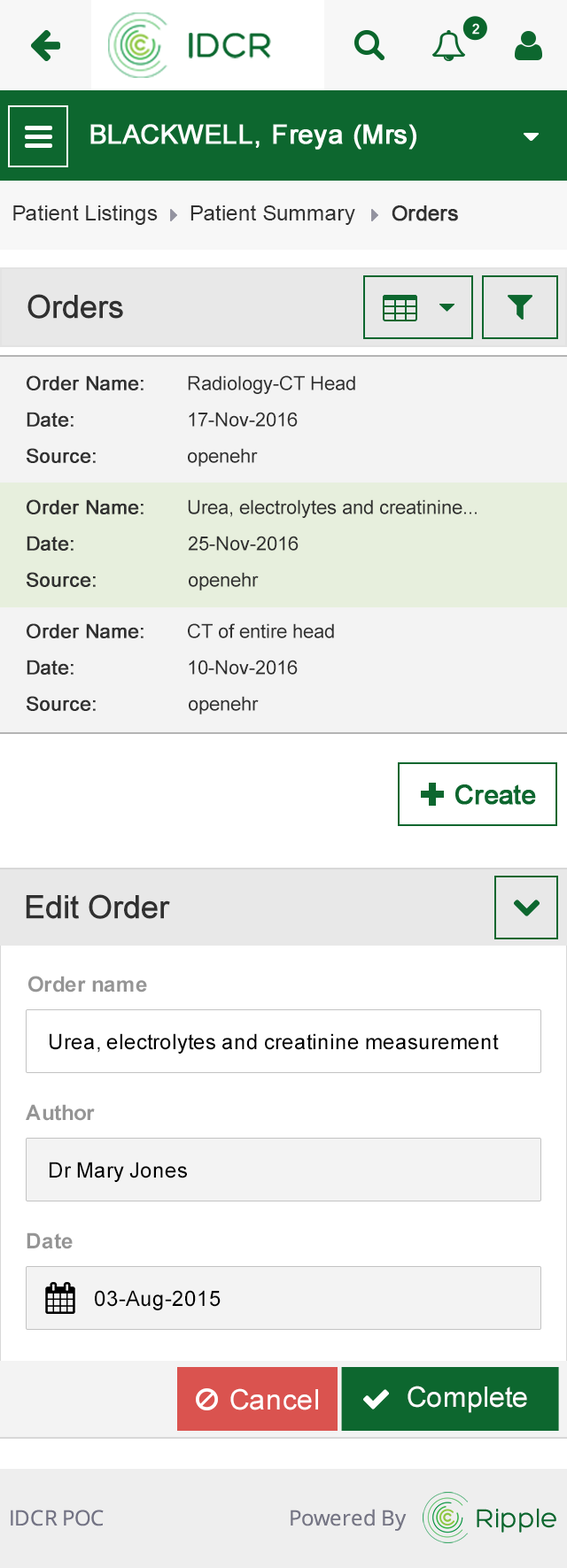
<style>
.page{position:relative;width:567px;height:1568px;background:#ffffff}
.page>*{position:absolute;margin:0}
.t1{font:21.2px "ArialMT";color:#313131}
.t2{font:21.2px "ArialMT";color:#313131;font-weight:bold}
.t3{font:31.9px "ArialMT";color:#303030;font-weight:bold}
.t4{font:19.5px "ArialMT";color:#303030;font-weight:bold}
.t5{font:19.5px "ArialMT";color:#303030}
.t6{font:21.2px "Arial-BoldMT";color:#959595}
.t7{font:21.2px "ArialMT";color:#000000}
.t8{font:28.3px "ArialMT";color:#ffffff}
</style>
<div class="page">
<p class="t1" style="left:13px;top:205px;width:145px;height:20px">Patient Listings</p>
<p class="t1" style="left:190px;top:205px;width:165px;height:20px">Patient Summary</p>
<p class="t2" style="left:391px;top:205px;width:67px;height:16px">Orders</p>
<p class="t3" style="left:27px;top:294px;width:96px;height:25px">Orders</p>
<p class="t4" style="left:27px;top:375px;width:116px;height:15px">Order Name:</p>
<p class="t5" style="left:188px;top:375px;width:167px;height:19px">Radiology-CT Head</p>
<p class="t4" style="left:27px;top:412px;width:46px;height:15px">Date:</p>
<p class="t5" style="left:189px;top:412px;width:108px;height:15px">17-Nov-2016</p>
<p class="t4" style="left:27px;top:448px;width:69px;height:15px">Source:</p>
<p class="t5" style="left:188px;top:448px;width:70px;height:19px">openehr</p>
<p class="t4" style="left:27px;top:499px;width:116px;height:15px">Order Name:</p>
<p class="t5" style="left:188px;top:499px;width:288px;height:19px">Urea, electrolytes and creatinine...</p>
<p class="t4" style="left:27px;top:536px;width:46px;height:15px">Date:</p>
<p class="t5" style="left:188px;top:536px;width:110px;height:15px">25-Nov-2016</p>
<p class="t4" style="left:27px;top:572px;width:69px;height:15px">Source:</p>
<p class="t5" style="left:189px;top:572px;width:70px;height:19px">openehr</p>
<p class="t4" style="left:27px;top:623px;width:116px;height:15px">Order Name:</p>
<p class="t5" style="left:188px;top:623px;width:146px;height:15px">CT of entire head</p>
<p class="t4" style="left:27px;top:660px;width:46px;height:15px">Date:</p>
<p class="t5" style="left:189px;top:660px;width:108px;height:15px">10-Nov-2016</p>
<p class="t4" style="left:27px;top:696px;width:69px;height:15px">Source:</p>
<p class="t5" style="left:189px;top:696px;width:70px;height:18px">openehr</p>
<p class="t3" style="left:26px;top:894px;width:144px;height:25px">Edit Order</p>
<p class="t6" style="left:28px;top:976px;width:119px;height:17px">Order name</p>
<p class="t7" style="left:50px;top:1033px;width:448px;height:21px">Urea, electrolytes and creatinine measurement</p>
<p class="t6" style="left:26px;top:1104px;width:69px;height:17px">Author</p>
<p class="t7" style="left:50px;top:1162px;width:137px;height:20px">Dr Mary Jones</p>
<p class="t6" style="left:27px;top:1232px;width:46px;height:17px">Date</p>
<p class="t7" style="left:95px;top:1290px;width:125px;height:20px">03-Aug-2015</p>
<p class="t8" style="left:407px;top:1386px;width:120px;height:27px">Complete</p>
<p class="t8" style="left:230px;top:1388px;width:88px;height:22px">Cancel</p>
</div>
